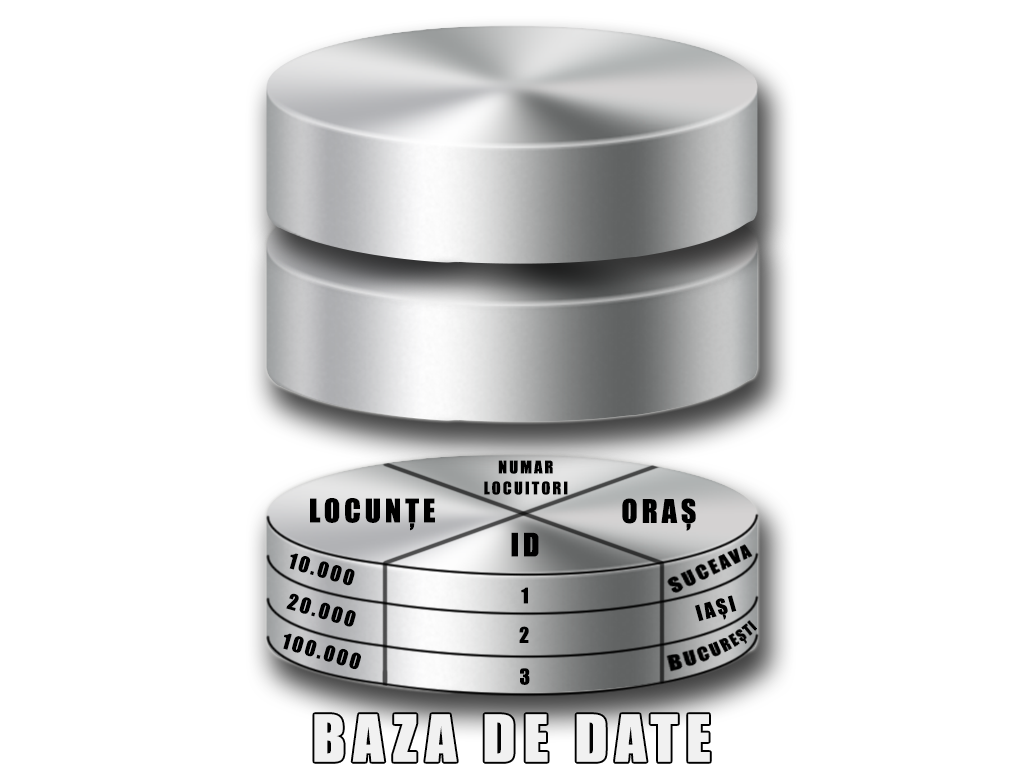
<style>
.page{position:relative;width:1024px;height:780px;background:#ffffff}
.page>*{position:absolute;margin:0}
.t1{font:16.3px/21px "Impact";letter-spacing:0.13em;color:#000000}
.t2{font:30px "Impact";letter-spacing:0.13em;color:#000000}
.t3{font:20px "Impact";letter-spacing:0.13em;color:#000000}
.t4{font:60px "Impact";letter-spacing:0.13em;color:#f1f1f1}
</style>
<div class="page">
<p class="t1" style="left:484px;top:460px;width:84px;height:35px;text-align:center">NUMAR<br>LOCUITORI</p>
<p class="t2" style="left:310px;top:498px;width:125px;height:33px">LOCUNȚE</p>
<p class="t2" style="left:622px;top:498px;width:74px;height:33px">ORAȘ</p>
<p class="t2" style="left:511px;top:532px;width:28px;height:25px">ID</p>
<p class="t3" style="left:289px;top:553px;width:66px;height:33px;rotate:16deg">10.000</p>
<p class="t3" style="left:286px;top:593px;width:70px;height:34px;rotate:16deg">20.000</p>
<p class="t3" style="left:521px;top:587px;width:7px;height:17px">1</p>
<p class="t3" style="left:695px;top:595px;width:42px;height:27px;rotate:-16deg">IAȘI</p>
<p class="t3" style="left:519px;top:626px;width:10px;height:17px">2</p>
<p class="t3" style="left:283px;top:633px;width:78px;height:37px;rotate:16deg">100.000</p>
<p class="t3" style="left:520px;top:668px;width:10px;height:17px">3</p>
<p class="t4" style="left:314px;top:714px;width:396px;height:48px">BAZA DE DATE</p>
</div>
